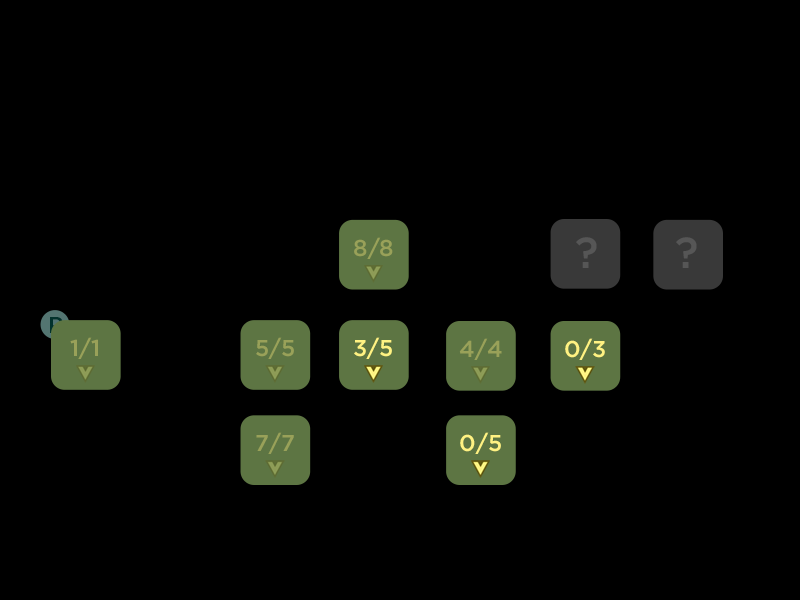
<style>
.page{position:relative;width:800px;height:600px;background:#000000}
.page>*{position:absolute;margin:0}
.t1{font:22.9px "Gotham-Medium";color:#99a159}
.t2{font:43.3px "Gotham-Medium";color:#565656}
.t3{font:22.9px "Gotham-Medium";color:#02322c}
.t4{font:22.9px "Gotham-Medium";color:#fff282}
</style>
<div class="page">
<p class="t1" style="left:354px;top:237px;width:39px;height:22px">8/8</p>
<p class="t2" style="left:576px;top:237px;width:21px;height:31px">?</p>
<p class="t2" style="left:676px;top:237px;width:21px;height:31px">?</p>
<p class="t3" style="left:50px;top:317px;width:13px;height:16px">P</p>
<p class="t1" style="left:70px;top:337px;width:28px;height:22px">1/1</p>
<p class="t1" style="left:256px;top:337px;width:38px;height:22px">5/5</p>
<p class="t4" style="left:354px;top:337px;width:38px;height:22px">3/5</p>
<p class="t1" style="left:459px;top:338px;width:43px;height:22px">4/4</p>
<p class="t4" style="left:565px;top:338px;width:40px;height:22px">0/3</p>
<p class="t1" style="left:256px;top:432px;width:38px;height:22px">7/7</p>
<p class="t4" style="left:460px;top:432px;width:41px;height:22px">0/5</p>
</div>
